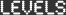
<style>
.page{position:relative;width:66px;height:15px;background:#333333}
.page>*{position:absolute;margin:0}
.t1{font:20px "SynchroLET";color:#ffffff}
</style>
<div class="page">
<p class="t1" style="left:0px;top:0px;width:66px;height:15px">LEVELS</p>
</div>
